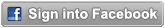
<style>
.page{position:relative;width:165px;height:28px}
.page>*{position:absolute;margin:0}
.t1{font:14px "Arial-BoldMT";color:#ffffff}
</style>
<div class="page">
<p class="t1" style="left:28px;top:8px;width:130px;height:14px">Sign into Facebook</p>
</div>
